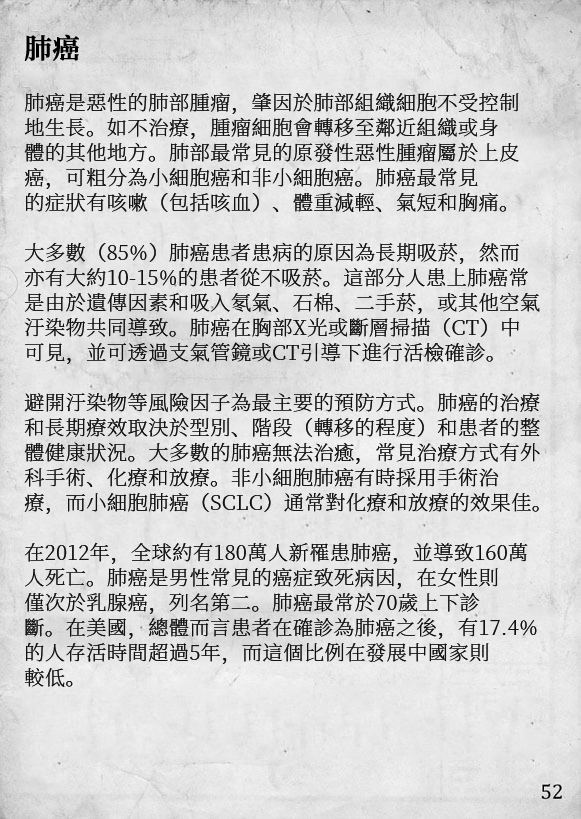
<style>
.page{position:relative;width:581px;height:819px}
.page>*{position:absolute;margin:0}
.t1{font:20.2px/25px "SourceHanSerifCN-ExtraLight";letter-spacing:0.02em;color:#111111}
.t2{font:27.2px/29px "SourceHanSerifCN-SemiBold";letter-spacing:0.02em;color:#000000;font-weight:bold}
</style>
<div class="page">
<p class="t1" style="left:24px;top:34px;width:516px;height:653px"><span class="t2">肺癌<br><br></span>肺癌是惡性的肺部腫瘤，肇因於肺部組織細胞不受控制<br>地生長。如不治療，腫瘤細胞會轉移至鄰近組織或身<br>體的其他地方。肺部最常見的原發性惡性腫瘤屬於上皮<br>癌，可粗分為小細胞癌和非小細胞癌。肺癌最常見<br>的症狀有咳嗽（包括咳血）、體重減輕、氣短和胸痛。<br><br>大多數（85%）肺癌患者患病的原因為長期吸菸，然而<br>亦有大約10-15%的患者從不吸菸。這部分人患上肺癌常<br>是由於遺傳因素和吸入氡氣、石棉、二手菸，或其他空氣<br>汙染物共同導致。肺癌在胸部X光或斷層掃描（CT）中<br>可見，並可透過支氣管鏡或CT引導下進行活檢確診。<br><br>避開汙染物等風險因子為最主要的預防方式。肺癌的治療<br>和長期療效取決於型別、階段（轉移的程度）和患者的整<br>體健康狀況。大多數的肺癌無法治癒，常見治療方式有外<br>科手術、化療和放療。非小細胞肺癌有時採用手術治<br>療，而小細胞肺癌（SCLC）通常對化療和放療的效果佳。<br><br>在2012年，全球約有180萬人新罹患肺癌，並導致160萬<br>人死亡。肺癌是男性常見的癌症致死病因，在女性則<br>僅次於乳腺癌，列名第二。肺癌最常於70歲上下診<br>斷。在美國，總體而言患者在確診為肺癌之後，有17.4%<br>的人存活時間超過5年，而這個比例在發展中國家則<br>較低。</p>
</div>
